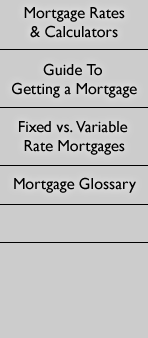
<style>
.page{position:relative;width:148px;height:338px;background:#cccccc}
.page>*{position:absolute;margin:0}
.t1{font:16px/19px "GillSansMT";color:#000000}
</style>
<div class="page">
<p class="t1" style="left:12px;top:7px;width:125px;height:186px;text-align:center">Mortgage Rates<br>&amp; Calculators<br><br>Guide To<br>Getting a Mortgage<br><br>Fixed vs. Variable<br>Rate Mortgages<br><br>Mortgage Glossary</p>
</div>
